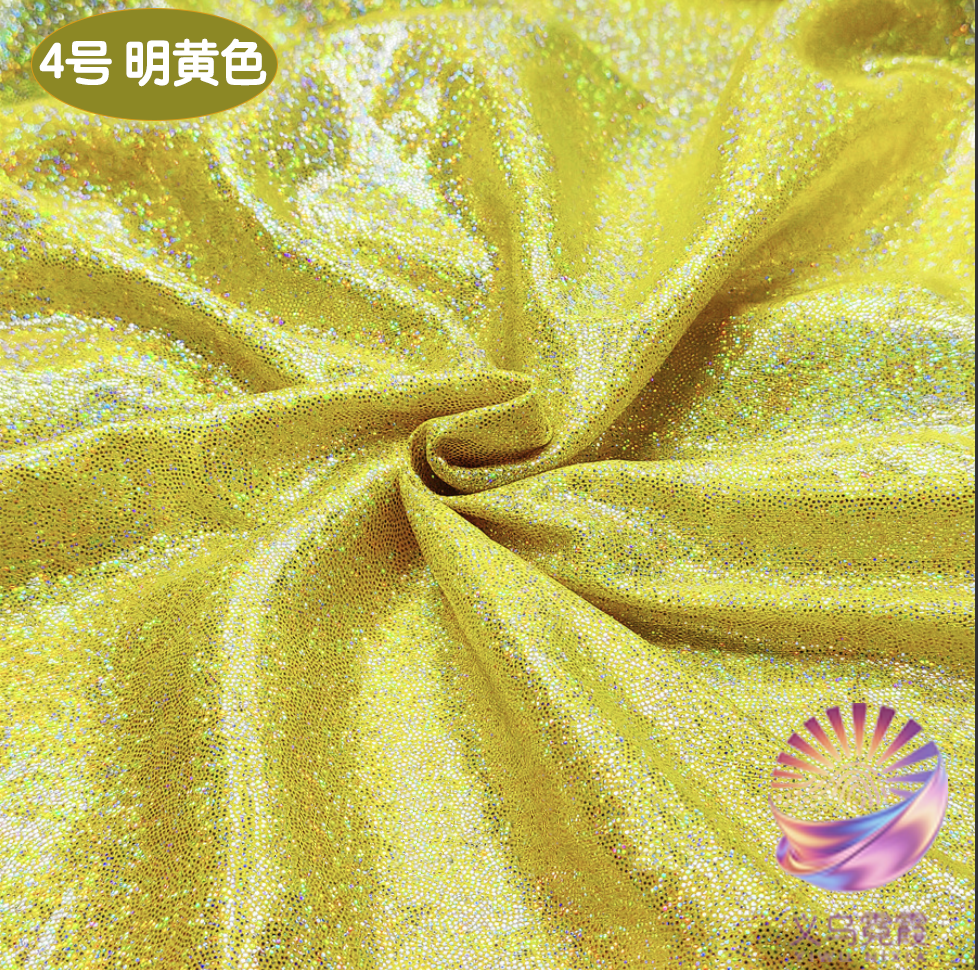
<style>
.page{position:relative;width:978px;height:970px}
.page>*{position:absolute;margin:0}
.t1{font:49.1px "STYuanti-SC-Bold";color:#ffffff;scale:0.97 1}
.t2{font:84.6px "STBaoliSC-Regular";color:#ffffff;scale:0.97 1}
</style>
<div class="page">
<p class="t1" style="left:39px;top:38px;width:228px;height:49px"><span class="t2">         </span>4号 明黄色</p>
</div>
